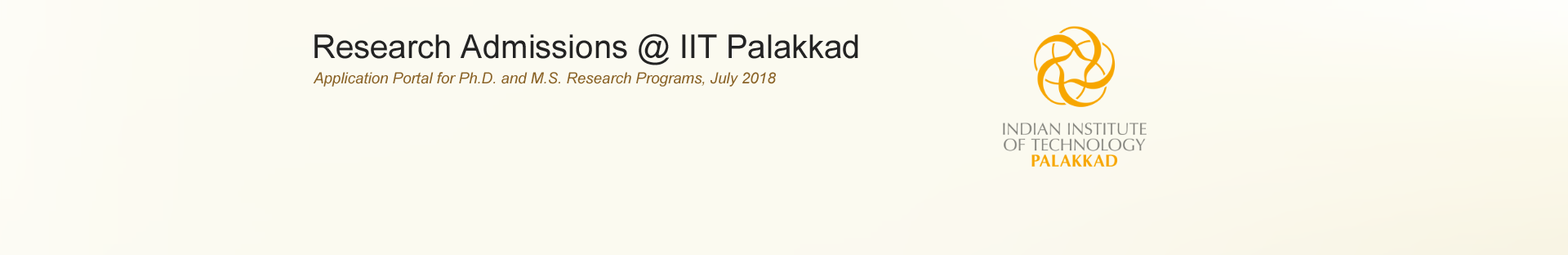
<style>
.page{position:relative;width:1568px;height:255px;background:#fbfaf0}
.page>*{position:absolute;margin:0}
.t1{font:32.7px "ArialMT";color:#232323}
.t2{font:15.2px "Arial-ItalicMT";color:#8a6327}
</style>
<div class="page">
<p class="t1" style="left:314px;top:33px;width:544px;height:32px">Research Admissions @ IIT Palakkad</p>
<p class="t2" style="left:313px;top:72px;width:463px;height:15px">Application Portal for Ph.D. and M.S. Research Programs, July 2018</p>
</div>
